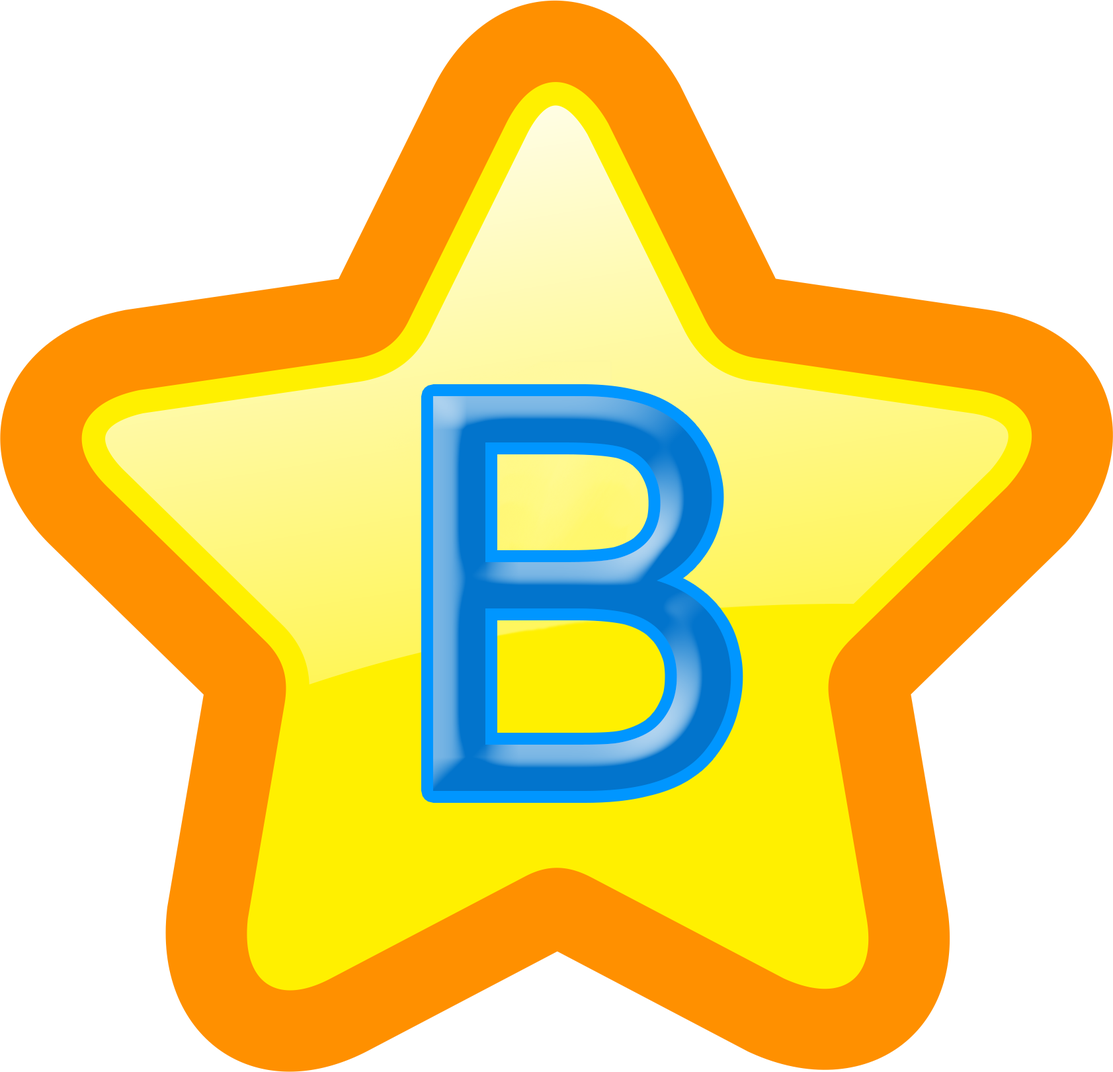
<style>
.page{position:relative;width:1113px;height:1072px;background:#ffffff}
.page>*{position:absolute;margin:0}
.t1{font:550.9px "ArialMT"}
</style>
<div class="page">
<p class="t1" style="left:432px;top:396px;width:299px;height:395px">B</p>
</div>
